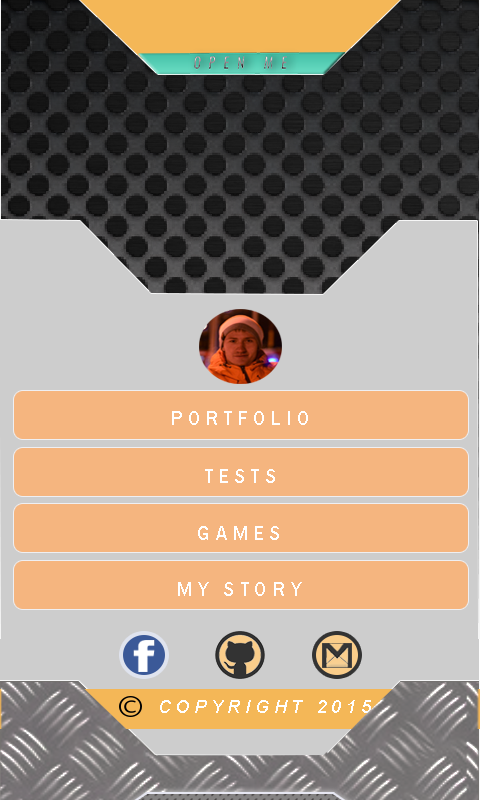
<style>
.page{position:relative;width:480px;height:800px;background:#cdcdcd}
.page>*{position:absolute;margin:0}
.t1{font:20px "FranklinGothic-Medium";letter-spacing:0.26em;color:#ffffff;text-transform:uppercase}
.t2{font:18px "Arial-ItalicMT";letter-spacing:0.26em;color:#ffffff;text-transform:uppercase}
</style>
<div class="page">
<p class="t1" style="left:172px;top:411px;width:136px;height:14px">Portfolio</p>
<p class="t1" style="left:205px;top:469px;width:70px;height:14px">tests</p>
<p class="t1" style="left:198px;top:526px;width:81px;height:14px">games</p>
<p class="t1" style="left:178px;top:582px;width:124px;height:14px">my story</p>
<p class="t2" style="left:160px;top:700px;width:211px;height:13px">copyright 2015</p>
</div>
